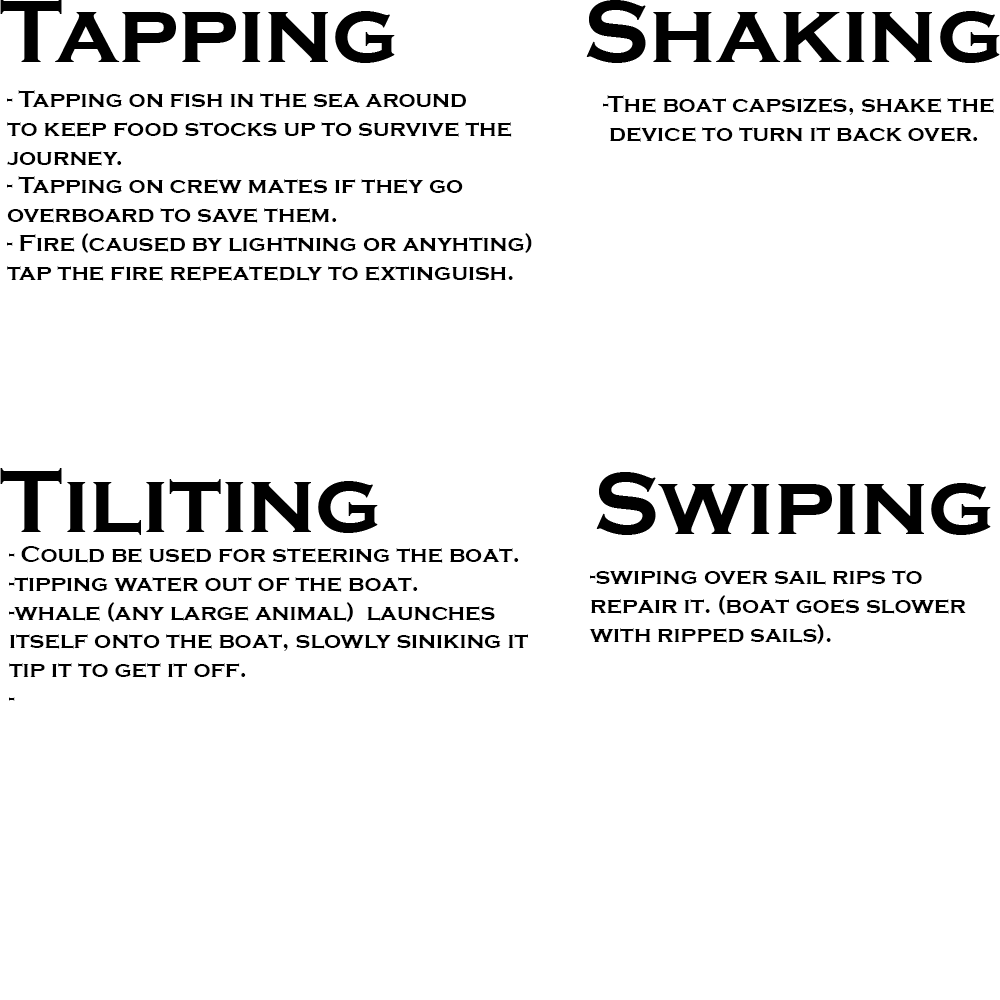
<style>
.page{position:relative;width:1000px;height:1000px;background:#ffffff}
.page>*{position:absolute;margin:0}
.t1{font:24px "CopperplateGothic-Bold";color:#000000}
</style>
<div class="page">
<p class="t1" style="left:7px;top:90px;width:525px;height:191px;text-align:right">- Tapping on fish in the sea around<br>to keep food stocks up to survive the <br>journey.<br>- Tapping on crew mates if they go <br>overboard to save them.<br>- Fire (caused by lightning or anyhting)<br>tap the fire repeatedly to extinguish.</p>
<p class="t1" style="left:603px;top:95px;width:391px;height:47px;text-align:right">-The boat capsizes, shake the<br> device to turn it back over.</p>
<p class="t1" style="left:9px;top:546px;width:519px;height:155px;text-align:right">- Could be used for steering the boat.<br>-tipping water out of the boat.<br>-whale (any large animal)  launches <br>itself onto the boat, slowly siniking it<br>tip it to get it off.<br>-</p>
<p class="t1" style="left:589px;top:570px;width:377px;height:74px;text-align:right">-swiping over sail rips to <br>repair it. (boat goes slower<br>with ripped sails).</p>
</div>
